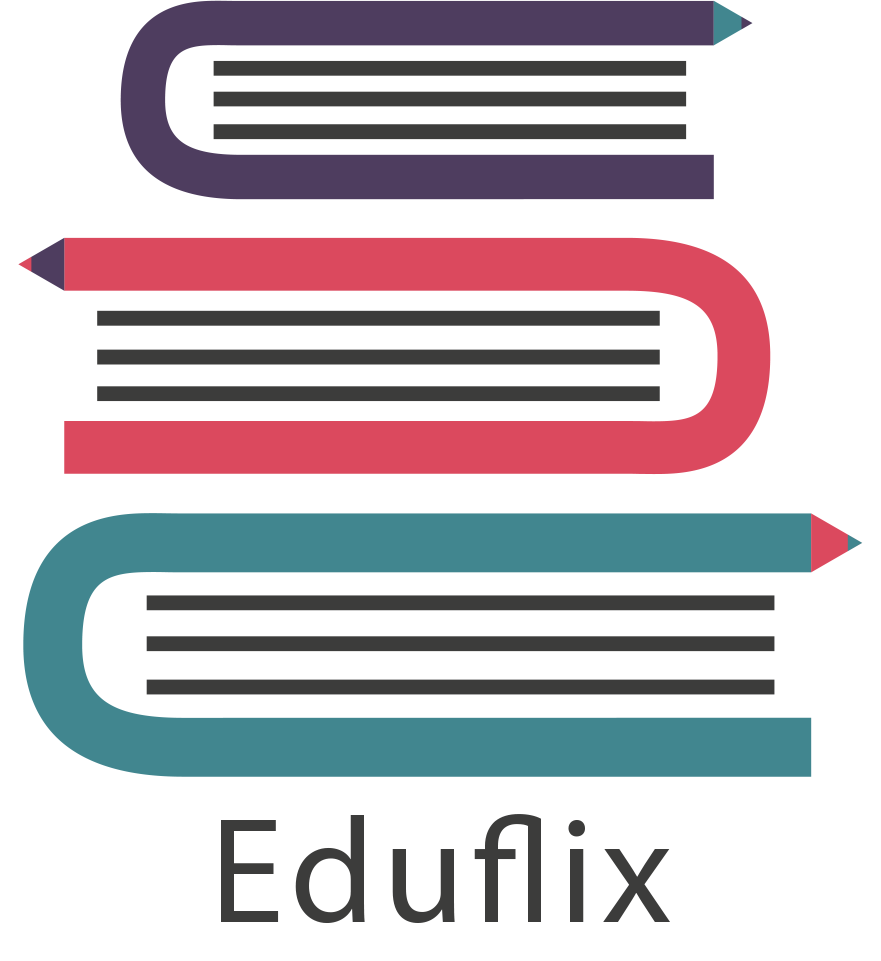
<style>
.page{position:relative;width:881px;height:961px;background:#ffffff}
.page>*{position:absolute;margin:0}
.t1{font:150.8px "Bebas";letter-spacing:0.05em;color:#3c3c3b}
</style>
<div class="page">
<p class="t1" style="left:221px;top:814px;width:449px;height:110px">Eduflix</p>
</div>
